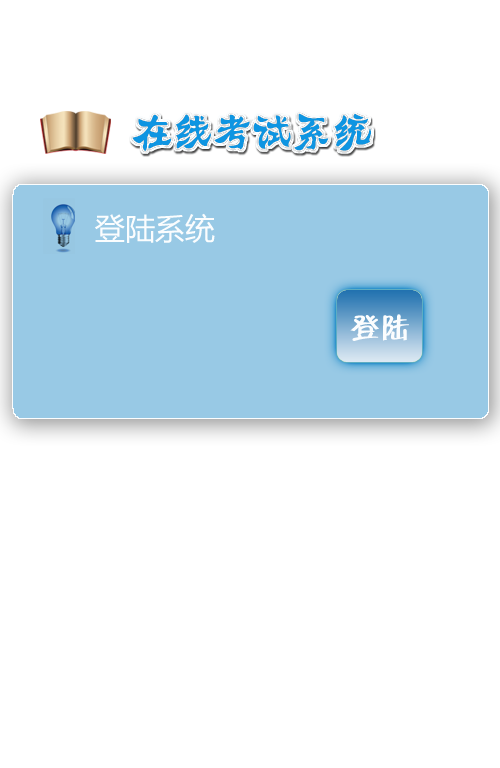
<style>
.page{position:relative;width:500px;height:768px;background:#ffffff}
.page>*{position:absolute;margin:0}
.t1{font:30px "MicrosoftYaHei";color:#fbfdfe}
.t2{font:30px "Ftiebihei";color:#fbfdfe}
</style>
<div class="page">
<p class="t1" style="left:95px;top:213px;width:120px;height:30px">登陆系统</p>
<p class="t2" style="left:350px;top:314px;width:59px;height:27px">登陆</p>
</div>
